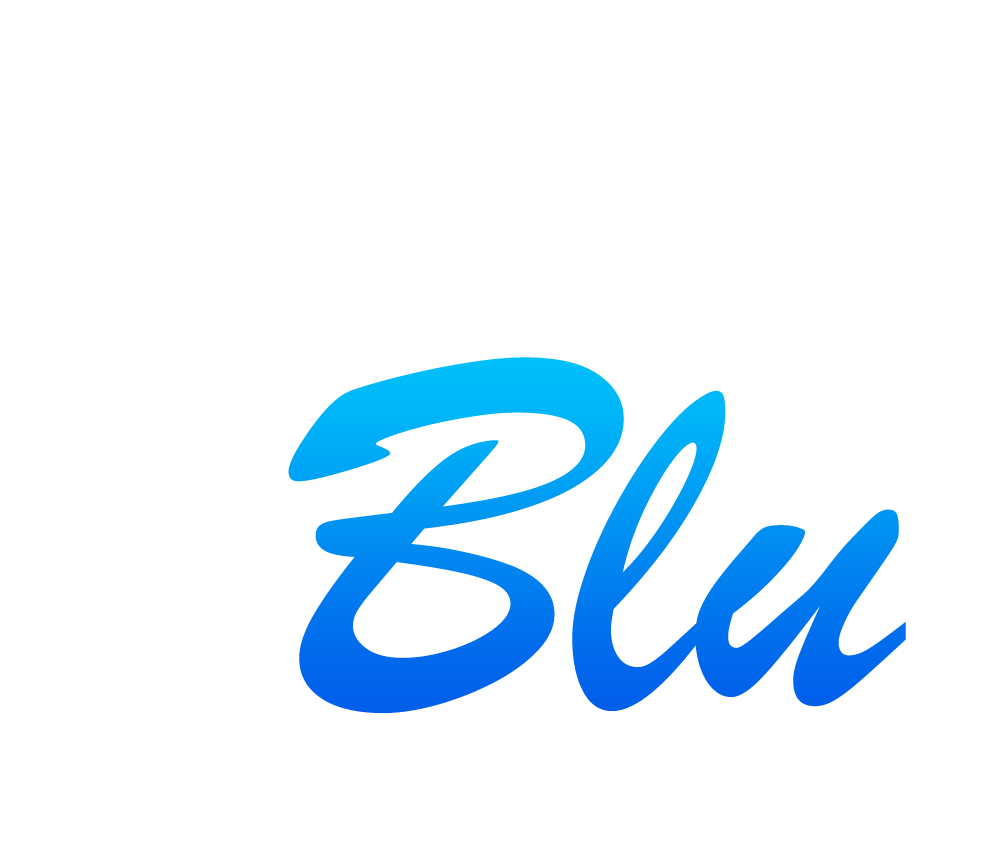
<style>
.page{position:relative;width:998px;height:856px;background:#ffffff}
.page>*{position:absolute;margin:0}
.t1{font:533.3px "BrushScriptMT"}
</style>
<div class="page">
<p class="t1" style="left:288px;top:357px;width:618px;height:356px">Blu</p>
</div>
